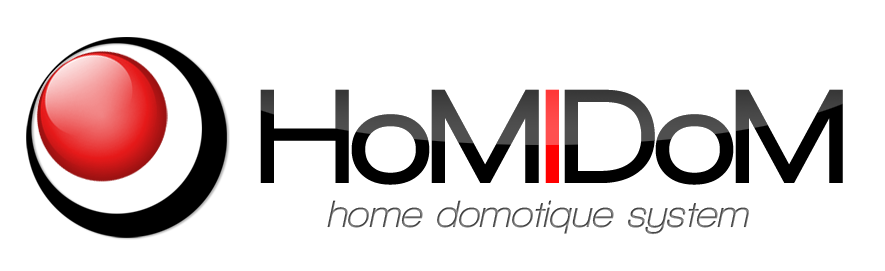
<style>
.page{position:relative;width:885px;height:271px;background:#ffffff}
.page>*{position:absolute;margin:0}
.t1{font:137.3px "WalkwayBlack";letter-spacing:0.01em}
.t2{font:38.7px "WalkwayObliqueBold";letter-spacing:0.01em}
</style>
<div class="page">
<p class="t1" style="left:260px;top:89px;width:583px;height:96px">HoMIDoM</p>
<p class="t2" style="left:327px;top:200px;width:422px;height:35px">home domotique system</p>
</div>
